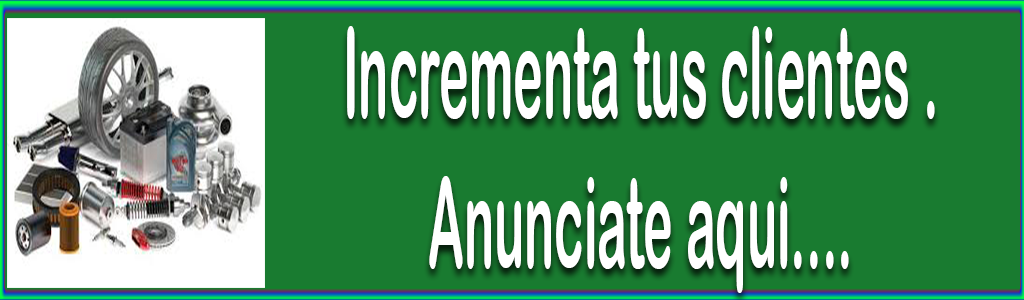
<style>
.page{position:relative;width:1024px;height:300px;background:#197b30}
.page>*{position:absolute;margin:0}
.t1{font:125px "ArialRoundedMTBold";color:#ffffff;scale:0.4 1}
</style>
<div class="page">
<p class="t1" style="left:347px;top:26px;width:588px;height:267px;text-align:center">Incrementa tus clientes .<br>Anunciate aqui....</p>
</div>
